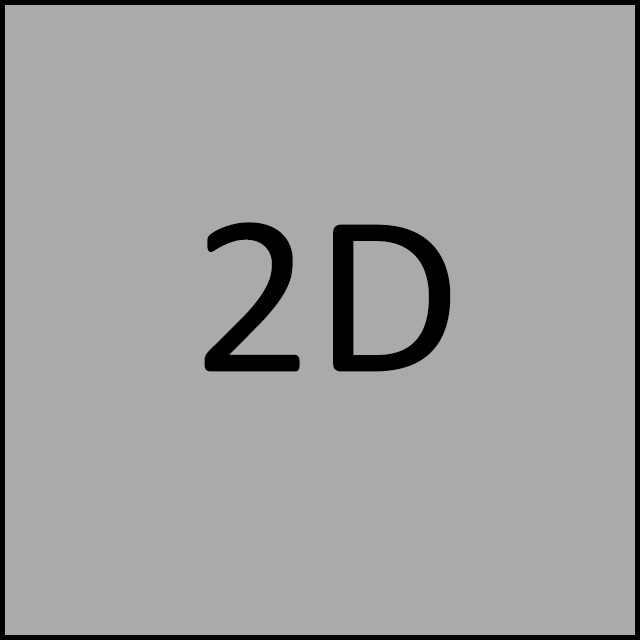
<style>
.page{position:relative;width:640px;height:640px;background:#aaaaaa}
.page>*{position:absolute;margin:0}
.t1{font:232.2px "Calibri";color:#000000;scale:1.04 1}
</style>
<div class="page">
<p class="t1" style="left:204px;top:222px;width:247px;height:150px">2D</p>
</div>
